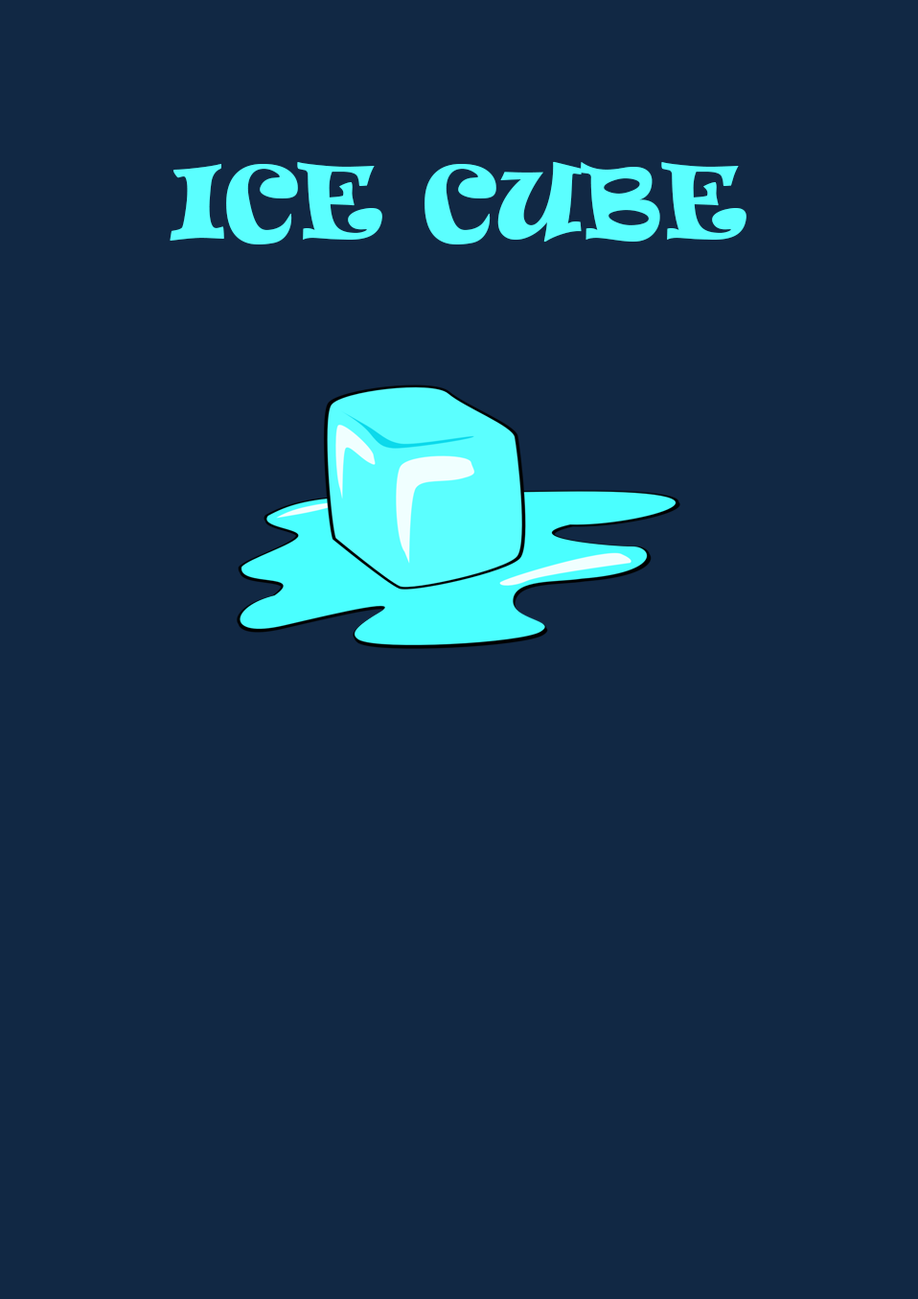
<style>
.page{position:relative;width:918px;height:1299px;background:#112844}
.page>*{position:absolute;margin:0}
.t1{font:95.9px "Ravie";color:#5bffff;scale:1.04 1}
</style>
<div class="page">
<p class="t1" style="left:170px;top:161px;width:577px;height:83px">ICE CUBE</p>
</div>
